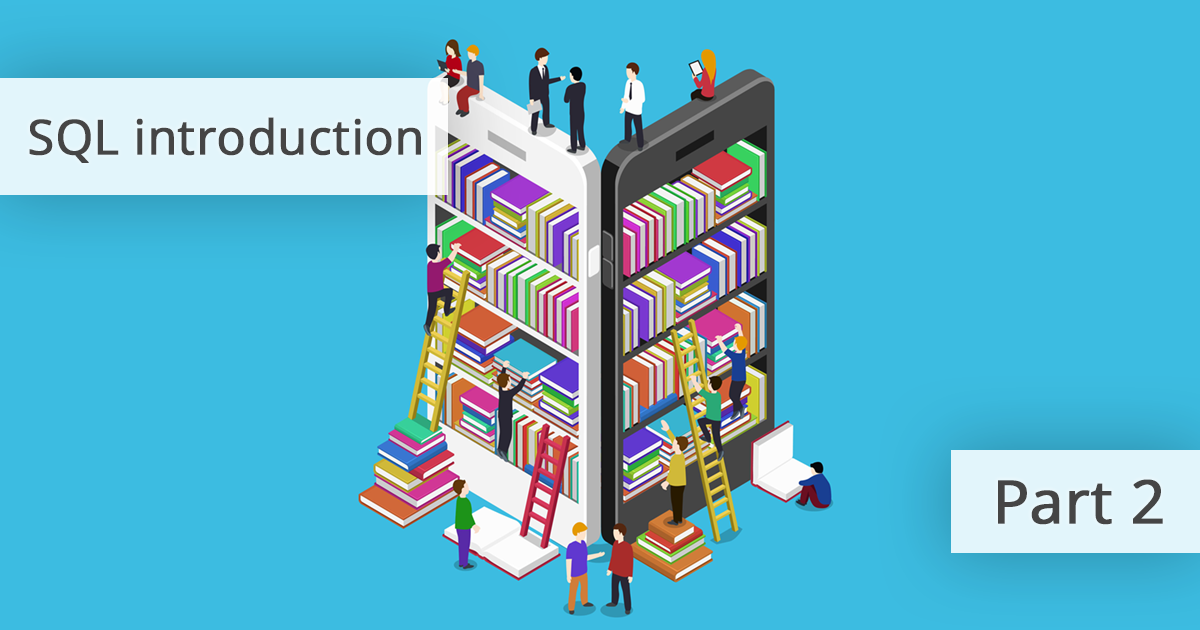
<style>
.page{position:relative;width:1200px;height:630px;background:#3cbce1}
.page>*{position:absolute;margin:0}
.t1{font:48px "OpenSans";color:#454545;font-weight:bold}
.t2{font:60px "OpenSans";color:#454545;font-weight:bold}
</style>
<div class="page">
<p class="t1" style="left:29px;top:117px;width:392px;height:46px">SQL introduction</p>
<p class="t2" style="left:998px;top:479px;width:165px;height:46px">Part 2</p>
</div>
